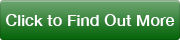
<style>
.page{position:relative;width:180px;height:40px}
.page>*{position:absolute;margin:0}
.t1{font:16.3px "HelveticaNeue-Medium";color:#ffffff}
</style>
<div class="page">
<p class="t1" style="left:6px;top:14px;width:169px;height:12px">Click to Find Out More</p>
</div>
